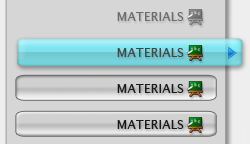
<style>
.page{position:relative;width:250px;height:144px;background:#d6d6d6}
.page>*{position:absolute;margin:0}
.t1{font:12.3px "LucidaSans";letter-spacing:0.006em;color:#6b6b6b}
.t2{font:12.3px "LucidaSans";letter-spacing:0.006em;color:#454545}
.t3{font:12.3px "LucidaSans";letter-spacing:0.006em;color:#191919}
</style>
<div class="page">
<p class="t1" style="left:117px;top:12px;width:67px;height:9px">MATERIALS</p>
<p class="t2" style="left:117px;top:48px;width:67px;height:9px">MATERIALS</p>
<p class="t3" style="left:117px;top:84px;width:67px;height:9px">MATERIALS</p>
<p class="t3" style="left:117px;top:120px;width:67px;height:9px">MATERIALS</p>
</div>
